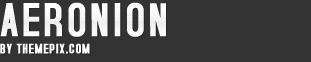
<style>
.page{position:relative;width:311px;height:62px;background:#333333}
.page>*{position:absolute;margin:0}
.t1{font:50px "AccidentalPresidency";letter-spacing:0.05em;color:#ffffff;text-transform:uppercase;font-weight:bold}
.t2{font:14px "AccidentalPresidency";letter-spacing:0.05em;color:#ffffff;text-transform:uppercase;font-weight:bold}
</style>
<div class="page">
<p class="t1" style="left:0px;top:2px;width:166px;height:35px">aeronion</p>
<p class="t2" style="left:0px;top:43px;width:90px;height:11px">by themepix.com</p>
</div>
